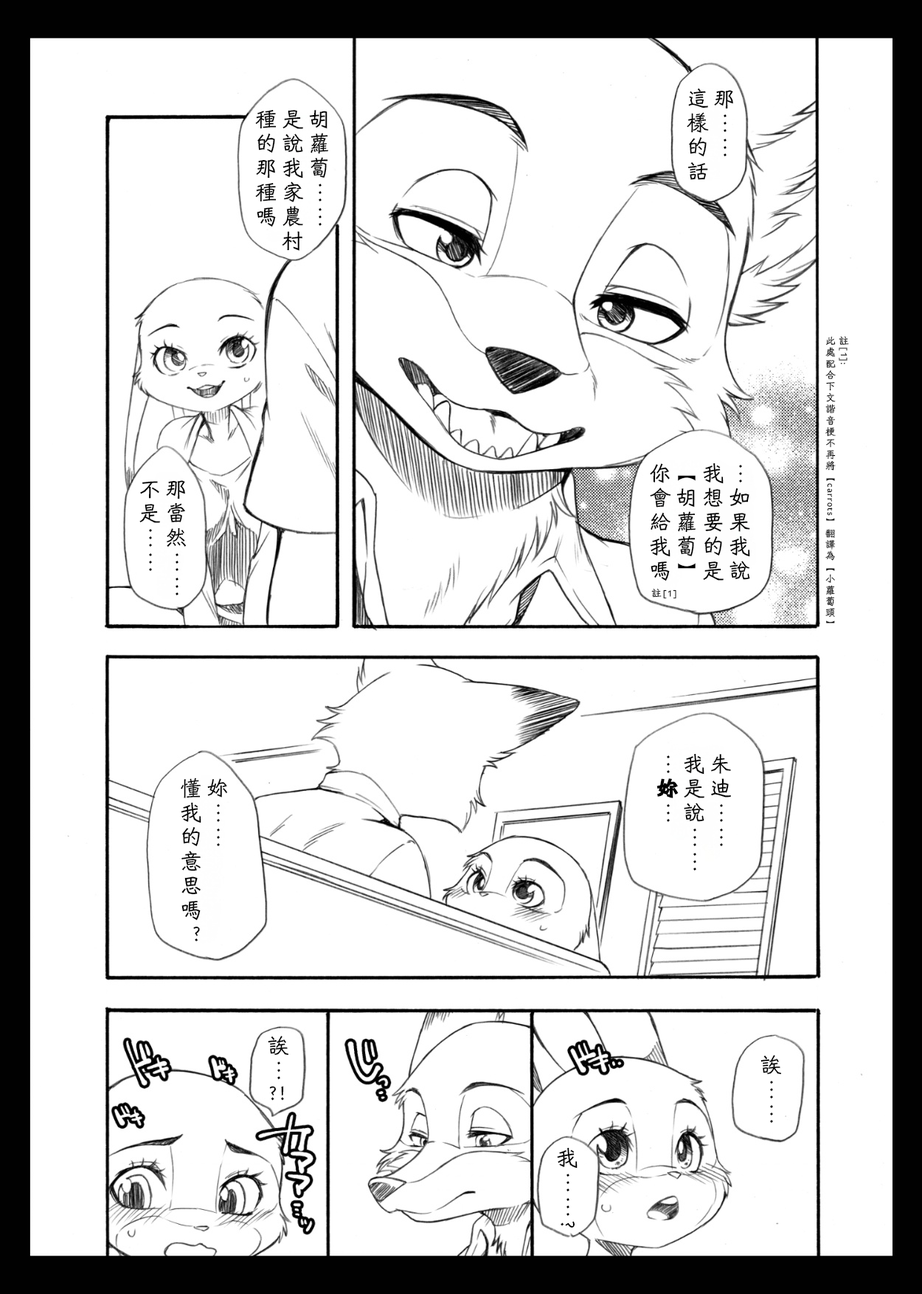
<style>
.page{position:relative;width:922px;height:1294px;background:#ffffff}
.page>*{position:absolute;margin:0}
.t1{font:22.1px/26.5px "HYShiWei55U";letter-spacing:0.1em;color:#000000}
.t2{font:10.3px/13.3px "HYShiWei55U";letter-spacing:0.1em;color:#000000}
.t3{font:10.3px "HYShiWei55U";letter-spacing:0.1em;color:#000000}
.t4{font:22.1px/26.5px "HYShiWei75U";letter-spacing:0.1em;color:#000000;font-weight:bold}
.t5{font:22.1px "HYShiWei55U";letter-spacing:0.1em;color:#000000}
</style>
<div class="page">
<p class="t1" style="left:687px;top:88px;width:46px;height:92px">那……<br>這樣的話</p>
<p class="t1" style="left:255px;top:110px;width:73px;height:141px">胡蘿蔔……<br>是說我家農村<br>種的那種嗎</p>
<p class="t2" style="left:825px;top:336px;width:24px;height:287px">註[1]:<br>此處配合下文諧音梗不再將【carrots】翻譯為【小蘿蔔頭】</p>
<p class="t1" style="left:650px;top:462px;width:100px;height:119px">…如果我說<br>我想要的是<br>【胡蘿蔔】<br>你會給我嗎</p>
<p class="t1" style="left:139px;top:480px;width:48px;height:115px">那當然……<br>不是……</p>
<p class="t3" style="left:651px;top:589px;width:25px;height:10px">註[1]</p>
<p class="t1" style="left:656px;top:753px;width:75px;height:117px">朱迪……<br>我是說……<br>…<span class="t4">妳</span>…</p>
<p class="t1" style="left:181px;top:777px;width:47px;height:164px">妳……<br>懂我的意思嗎？</p>
<p class="t1" style="left:268px;top:1035px;width:21px;height:44px">誒…</p>
<p class="t1" style="left:760px;top:1055px;width:22px;height:67px">誒……</p>
<p class="t5" style="left:269px;top:1086px;width:15px;height:14px">?!</p>
<p class="t1" style="left:557px;top:1147px;width:20px;height:80px">我……?</p>
</div>
